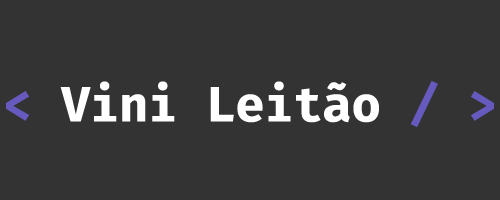
<style>
.page{position:relative;width:500px;height:200px;background:#333333}
.page>*{position:absolute;margin:0}
.t1{font:48px "FiraCode-Bold";letter-spacing:-0.01em;color:#ffffff}
.t2{font:48px "FiraCode-Bold";letter-spacing:-0.01em;color:#675abf}
</style>
<div class="page">
<p class="t1" style="left:6px;top:81px;width:488px;height:46px"><span class="t2">&lt; </span>Vini Leitão <span class="t2">/ &gt;</span></p>
</div>
